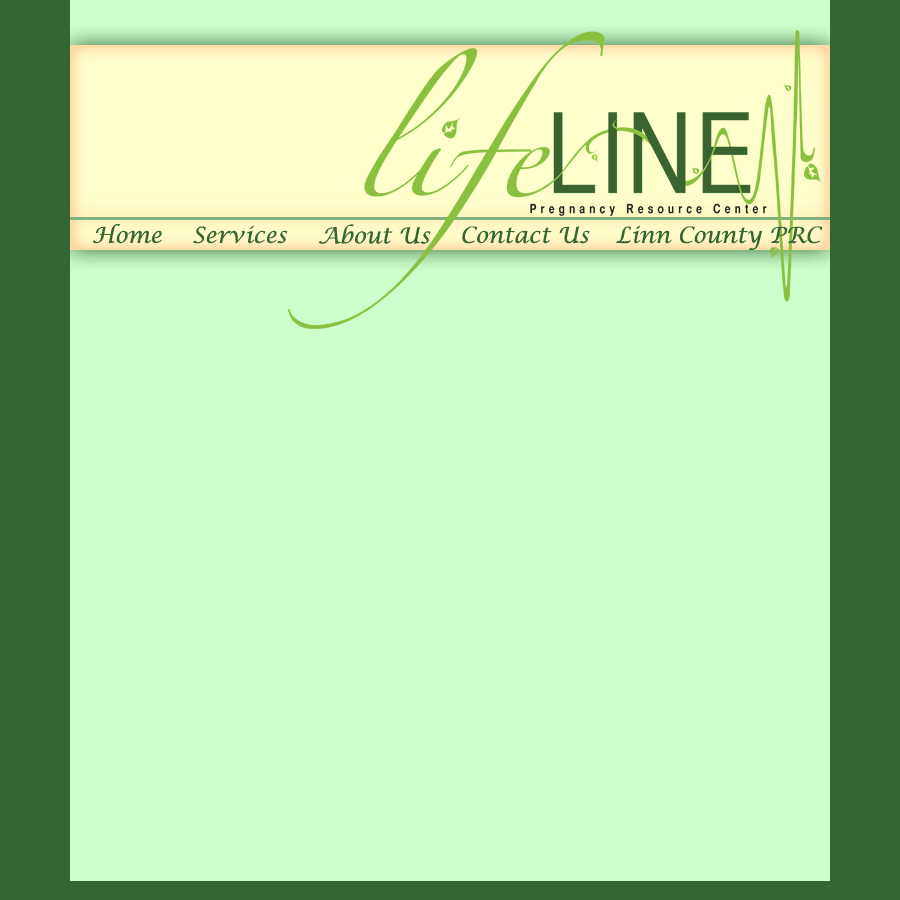
<style>
.page{position:relative;width:900px;height:900px;background:#ccffcc}
.page>*{position:absolute;margin:0}
.t1{font:22px "LucidaCalligraphy-Italic";color:#336633}
</style>
<div class="page">
<p class="t1" style="left:92px;top:223px;width:70px;height:21px">Home</p>
<p class="t1" style="left:193px;top:225px;width:95px;height:19px">Services</p>
<p class="t1" style="left:318px;top:224px;width:113px;height:20px">About Us</p>
<p class="t1" style="left:462px;top:226px;width:128px;height:18px">Contact Us</p>
<p class="t1" style="left:616px;top:225px;width:207px;height:25px">Linn County PRC</p>
</div>
